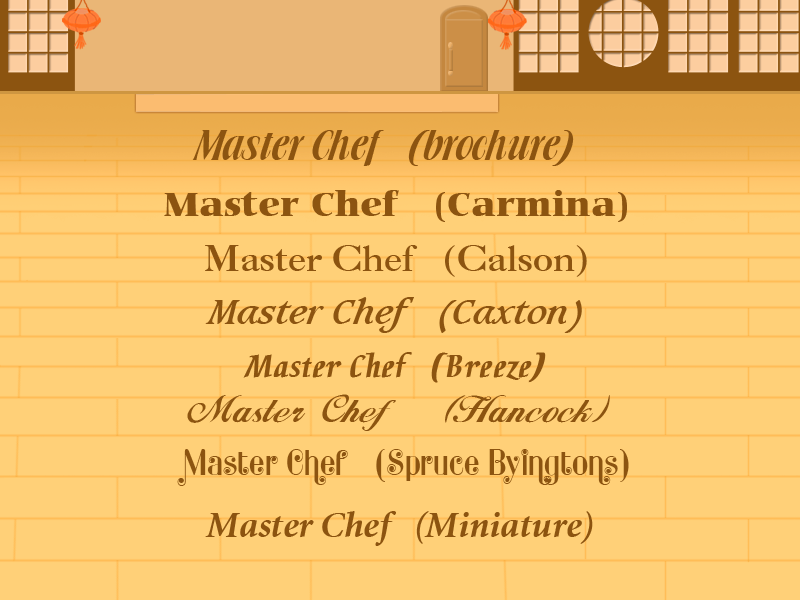
<style>
.page{position:relative;width:800px;height:600px;background:#ffd078}
.page>*{position:absolute;margin:0}
.t1{font:36.3px "BrochurePlain";color:#8c5410}
.t2{font:36.3px "CarminaBT-Black";color:#8c5410}
.t3{font:36.3px "CaslonBT-Bold";color:#8c5410}
.t4{font:36.3px "CaxtonBT-BoldItalic";color:#8c5410}
.t5{font:36.3px "BreezeBold";color:#8c5410}
.t6{font:36.3px "Hancock";color:#8c5410}
.t7{font:36.3px "SpruceByingtonSH";color:#8c5410}
.t8{font:36.3px "Miniature-BoldItalic";color:#8c5410}
</style>
<div class="page">
<p class="t1" style="left:192px;top:130px;width:382px;height:36px">Master Chef   (brochure)</p>
<p class="t2" style="left:164px;top:190px;width:463px;height:32px">Master Chef   (Carmina)</p>
<p class="t3" style="left:205px;top:245px;width:382px;height:32px">Master Chef   (Calson)</p>
<p class="t4" style="left:205px;top:297px;width:377px;height:36px">Master Chef   (Caxton)</p>
<p class="t5" style="left:243px;top:352px;width:303px;height:31px">Master Chef   (Breeze)</p>
<p class="t6" style="left:187px;top:394px;width:423px;height:37px">Master Chef   (Hancock)</p>
<p class="t7" style="left:177px;top:449px;width:452px;height:37px">Master Chef   (Spruce Byingtons)</p>
<p class="t8" style="left:205px;top:511px;width:388px;height:35px">Master Chef   (Miniature)</p>
</div>
